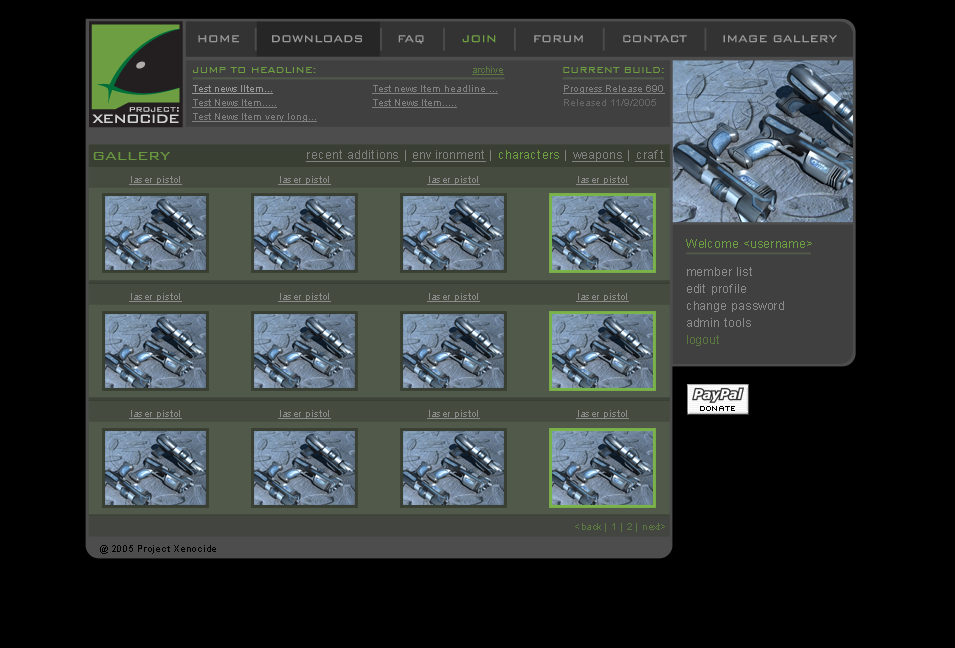
<style>
.page{position:relative;width:955px;height:648px;background:#000000}
.page>*{position:absolute;margin:0}
.t1{font:13px "BankGothicBT-Light";color:#999999}
.t2{font:13px "BankGothicBT-Light";color:#6d9e41}
.t3{font:11px "BankGothicBT-Light";color:#6d9e41}
.t4{font:9px "ArialMT";color:#5b7841;text-decoration:underline}
.t5{font:10px/14px "ArialMT";color:#808080;text-decoration:underline}
.t6{font:10px/14px "ArialMT";color:#999999;text-decoration:underline}
.t7{font:10px/20px "ArialMT";color:#808080;text-decoration:underline}
.t8{font:10px/14px "ArialMT";color:#666666}
.t9{font:12px "ArialMT";letter-spacing:0.025em;color:#808080;text-decoration:underline}
.t10{font:12px "ArialMT";letter-spacing:0.025em;color:#808080}
.t11{font:12px "ArialMT";letter-spacing:0.025em;color:#6d9e41}
.t12{font:19px "BankGothicBT-Light";color:#6a9840}
.t13{font:10px "ArialMT";letter-spacing:0.025em;color:#8b8b8b;text-decoration:underline}
.t14{font:12px/17px "ArialMT";letter-spacing:0.025em;color:#8b8b8b}
.t15{font:12px/17px "ArialMT";letter-spacing:0.025em;color:#5b7841}
.t16{font:10px "ArialMT";letter-spacing:0.025em;color:#5b7841}
.t17{font:9px "ArialMT";letter-spacing:0.05em;color:#000000}
</style>
<div class="page">
<p class="t1" style="left:198px;top:35px;width:41px;height:8px">HOME</p>
<p class="t1" style="left:272px;top:35px;width:90px;height:8px">DOWNLOADS</p>
<p class="t1" style="left:398px;top:35px;width:26px;height:9px">FAQ</p>
<p class="t2" style="left:462px;top:35px;width:34px;height:8px">JOIN</p>
<p class="t1" style="left:534px;top:35px;width:49px;height:8px">FORUM</p>
<p class="t1" style="left:623px;top:35px;width:64px;height:8px">CONTACT</p>
<p class="t1" style="left:723px;top:35px;width:114px;height:8px">IMAGE GALLERY</p>
<p class="t3" style="left:193px;top:67px;width:123px;height:6px">JUMP TO HEADLINE:</p>
<p class="t4" style="left:472px;top:66px;width:32px;height:9px">archive</p>
<p class="t3" style="left:563px;top:67px;width:101px;height:6px">CURRENT BUILD:</p>
<p class="t5" style="left:192px;top:85px;width:125px;height:37px"><span class="t6">Test news IItem...<br></span>Test News Item.....<br>Test News Item very long...</p>
<p class="t5" style="left:372px;top:85px;width:126px;height:23px">Test news Item headline ...<br>Test News Item.....</p>
<p class="t7" style="left:563px;top:85px;width:102px;height:21px">Progress Release 690<br><span class="t8">Released 11/9/2005</span></p>
<p class="t9" style="left:306px;top:150px;width:359px;height:12px">recent additions<span class="t10"> | </span>environment<span class="t10"> | </span><span class="t11">characters</span><span class="t10"> | </span>weapons<span class="t10"> | </span>craft</p>
<p class="t12" style="left:93px;top:152px;width:77px;height:8px">gallery</p>
<p class="t13" style="left:129px;top:176px;width:53px;height:9px">laser pistol</p>
<p class="t13" style="left:278px;top:176px;width:53px;height:9px">laser pistol</p>
<p class="t13" style="left:427px;top:176px;width:53px;height:9px">laser pistol</p>
<p class="t13" style="left:576px;top:176px;width:53px;height:9px">laser pistol</p>
<p class="t11" style="left:686px;top:239px;width:126px;height:9px">Welcome &lt;username&gt;</p>
<p class="t14" style="left:687px;top:267px;width:97px;height:79px">member list<br>edit profile<br>change password<br>admin tools<br><span class="t15">logout</span></p>
<p class="t13" style="left:129px;top:293px;width:53px;height:9px">laser pistol</p>
<p class="t13" style="left:278px;top:293px;width:53px;height:9px">laser pistol</p>
<p class="t13" style="left:427px;top:293px;width:53px;height:9px">laser pistol</p>
<p class="t13" style="left:576px;top:293px;width:53px;height:9px">laser pistol</p>
<p class="t13" style="left:129px;top:410px;width:53px;height:9px">laser pistol</p>
<p class="t13" style="left:278px;top:410px;width:53px;height:9px">laser pistol</p>
<p class="t13" style="left:427px;top:410px;width:53px;height:9px">laser pistol</p>
<p class="t13" style="left:576px;top:410px;width:53px;height:9px">laser pistol</p>
<p class="t16" style="left:575px;top:523px;width:90px;height:9px">&lt;back | 1 | 2 | next&gt;</p>
<p class="t17" style="left:100px;top:545px;width:116px;height:9px">@ 2005 Project Xenocide</p>
</div>
